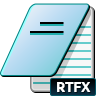
<style>
.page{position:relative;width:96px;height:96px;background:#ffffff}
.page>*{position:absolute;margin:0}
.t1{font:13.5px "Ubuntu-Bold";color:#ffffff}
</style>
<div class="page">
<p class="t1" style="left:57px;top:82px;width:34px;height:10px">RTFX</p>
</div>
